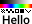
<style>
.page{position:relative;width:32px;height:24px;background:#ffffff}
.page>*{position:absolute;margin:0}
.t1{font:12px "Roboto-Medium";color:#000000}
</style>
<div class="page">
<p class="t1" style="left:2px;top:15px;width:28px;height:10px">Hello</p>
</div>
